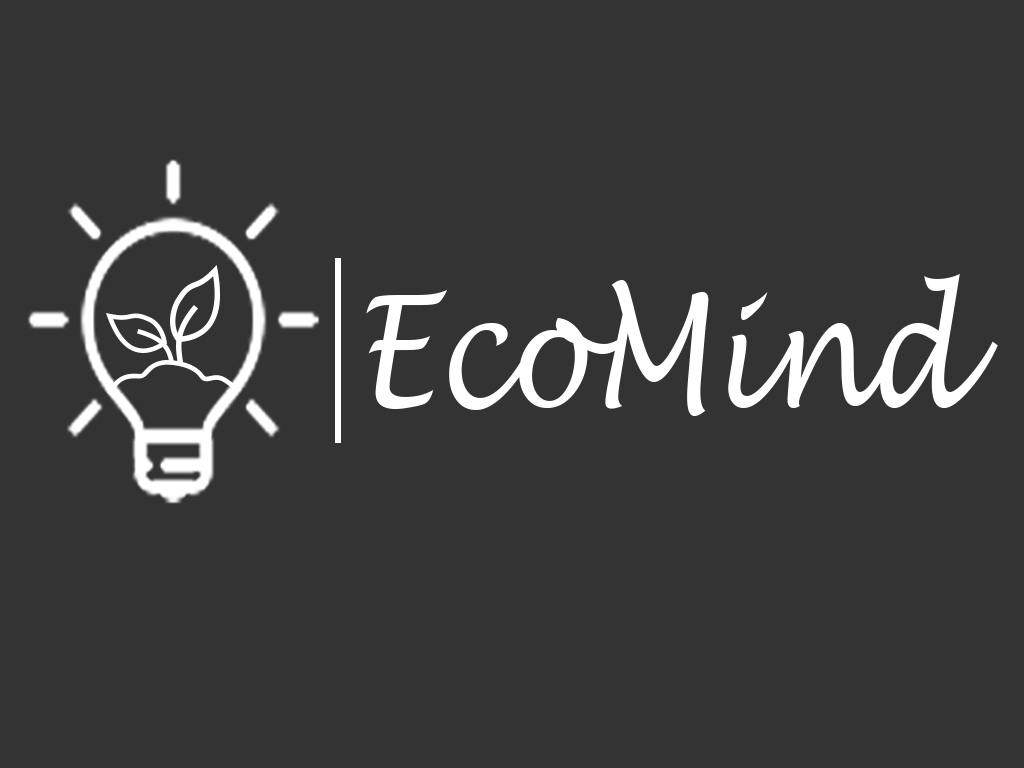
<style>
.page{position:relative;width:1024px;height:768px;background:#333333}
.page>*{position:absolute;margin:0}
.t1{font:154.4px "LucidaHandwriting-Italic";color:#ffffff;scale:0.82 1}
</style>
<div class="page">
<p class="t1" style="left:366px;top:274px;width:632px;height:142px">EcoMind</p>
</div>
